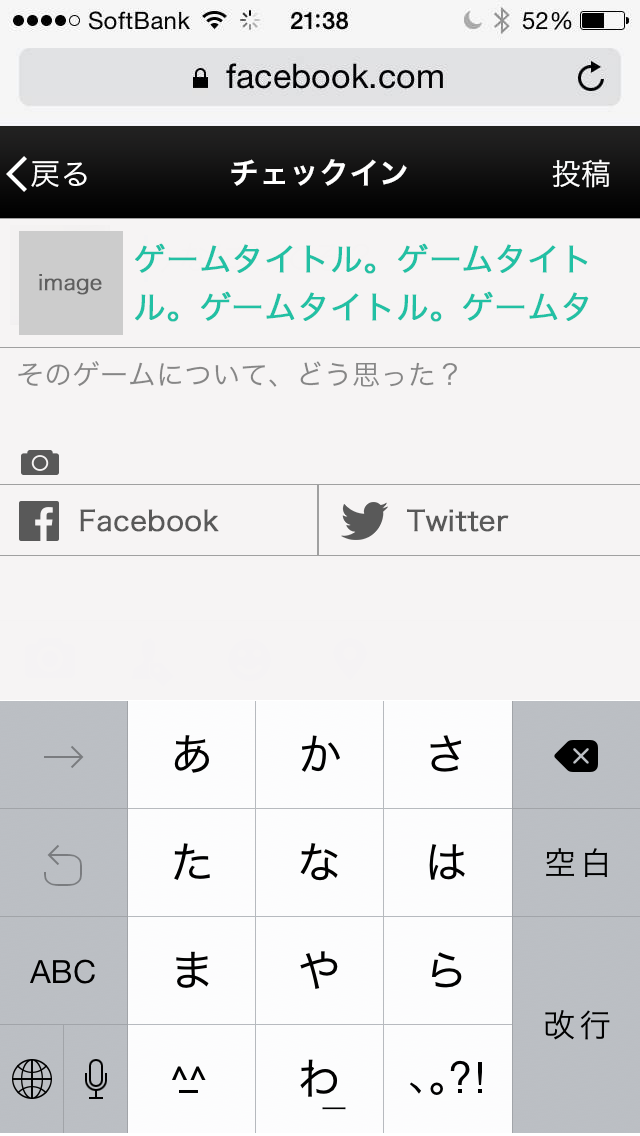
<style>
.page{position:relative;width:640px;height:1136px;background:#f6f4f4}
.page>*{position:absolute;margin:0}
.t1{font:30px "HiraKakuPro-W3";color:#ffffff}
.t2{font:30px "HiraKakuPro-W6";color:#ffffff}
.t3{font:32px/48px "HiraKakuPro-W3";color:#22c0a4;font-weight:bold}
.t4{font:32px/32px "HiraKakuPro-W3";color:#22c0a4;font-weight:bold}
.t5{font:20.8px "HiraKakuPro-W3";color:#5f5f5f;font-weight:bold}
.t6{font:28px "HiraKakuPro-W3";color:#868686}
.t7{font:28px "HiraKakuPro-W3";color:#595959;font-weight:bold}
</style>
<div class="page">
<p class="t1" style="left:31px;top:161px;width:56px;height:26px">戻る</p>
<p class="t2" style="left:231px;top:159px;width:176px;height:27px">チェックイン</p>
<p class="t1" style="left:552px;top:159px;width:58px;height:29px">投稿</p>
<p class="t3" style="left:135px;top:243px;width:454px;height:79px">ゲームタイトル。ゲームタイトル。ゲームタイトル。ゲームタ<span class="t4">イトル。</span></p>
<p class="t5" style="left:39px;top:274px;width:63px;height:21px">image</p>
<p class="t6" style="left:18px;top:361px;width:439px;height:26px">そのゲームについて、どう思った？</p>
<p class="t7" style="left:80px;top:509px;width:139px;height:23px">Facebook</p>
<p class="t7" style="left:407px;top:509px;width:102px;height:23px">Twitter</p>
</div>
